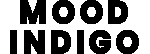
<style>
.page{position:relative;width:150px;height:54px;background:#ffffff}
.page>*{position:absolute;margin:0}
.t1{font:32.3px/30px "Poppins-ExtraBold";letter-spacing:0.1em;color:#000000;font-weight:bold;scale:0.94 1}
</style>
<div class="page">
<p class="t1" style="left:10px;top:0px;width:129px;height:54px;text-align:center">MOOD<br>INDIGO</p>
</div>
